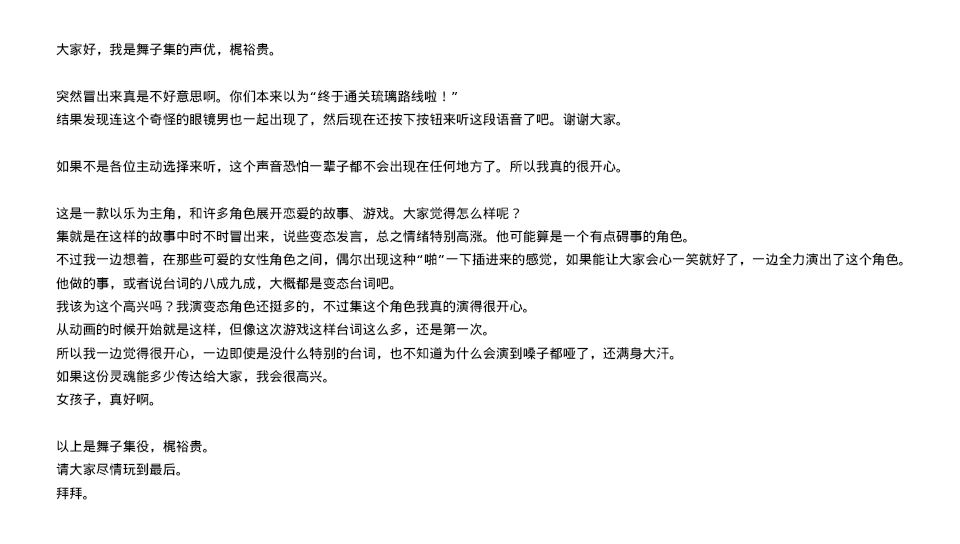
<style>
.page{position:relative;width:960px;height:544px;background:#ffffff}
.page>*{position:absolute;margin:0}
.t1{font:13.3px "WenQuanYiMicroHeiMono";color:#000000}
</style>
<div class="page">
<p class="t1" style="left:56px;top:43px;width:847px;height:457px">大家好，我是舞子集的声优，梶裕贵。<br><br>突然冒出来真是不好意思啊。你们本来以为“终于通关琉璃路线啦！”<br>结果发现连这个奇怪的眼镜男也一起出现了，然后现在还按下按钮来听这段语音了吧。谢谢大家。<br><br>如果不是各位主动选择来听，这个声音恐怕一辈子都不会出现在任何地方了。所以我真的很开心。<br><br>这是一款以乐为主角，和许多角色展开恋爱的故事、游戏。大家觉得怎么样呢？<br>集就是在这样的故事中时不时冒出来，说些变态发言，总之情绪特别高涨。他可能算是一个有点碍事的角色。<br>不过我一边想着，在那些可爱的女性角色之间，偶尔出现这种“啪”一下插进来的感觉，如果能让大家会心一笑就好了，一边全力演出了这个角色。<br>他做的事，或者说台词的八成九成，大概都是变态台词吧。<br>我该为这个高兴吗？我演变态角色还挺多的，不过集这个角色我真的演得很开心。<br>从动画的时候开始就是这样，但像这次游戏这样台词这么多，还是第一次。<br>所以我一边觉得很开心，一边即使是没什么特别的台词，也不知道为什么会演到嗓子都哑了，还满身大汗。<br>如果这份灵魂能多少传达给大家，我会很高兴。<br>女孩子，真好啊。<br><br>以上是舞子集役，梶裕贵。<br>请大家尽情玩到最后。<br>拜拜。</p>
</div>
